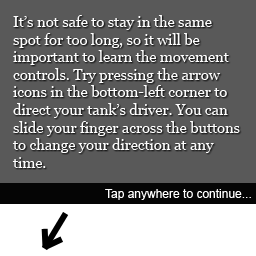
<style>
.page{position:relative;width:256px;height:256px;background:#595959}
.page>*{position:absolute;margin:0}
.t1{font:14.7px "Georgia";color:#fefefe}
.t2{font:12px "ArialMT";color:#ffffff}
</style>
<div class="page">
<p class="t1" style="left:12px;top:15px;width:228px;height:153px">It’s not safe to stay in the same<br>spot for too long, so it will be<br>important to learn the movement<br>controls. Try pressing the arrow<br>icons in the bottom-left corner to<br>direct your tank’s driver. You can<br>slide your finger across the buttons<br>to change your direction at any<br>time.</p>
<p class="t2" style="left:105px;top:189px;width:146px;height:11px">Tap anywhere to continue...</p>
</div>
